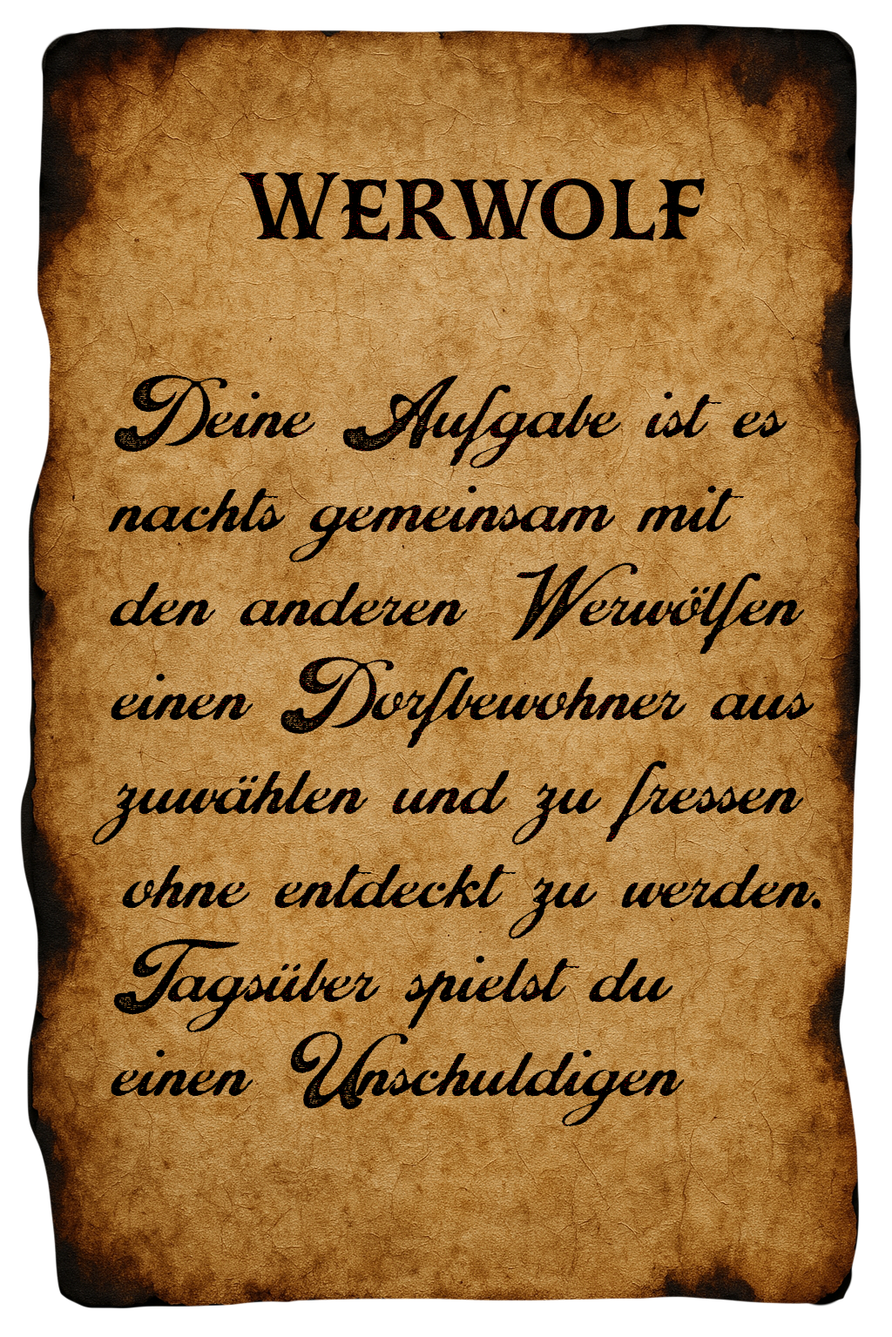
<style>
.page{position:relative;width:892px;height:1337px}
.page>*{position:absolute;margin:0}
.t1{font:78.4px "CaliforniaPersonalUse-Regular";color:#000000;scale:0.96 1}
.t2{font:95.6px "MrDarcy-Bol";color:#000000;scale:0.96 1}
.t3{font:78.4px "MyriadPro-Regular";color:#000000;scale:0.96 1}
</style>
<div class="page">
<p class="t1" style="left:91px;top:172px;width:729px;height:955px;text-align:center"><span class="t2">Werwolf<br><br></span>Deine Aufgabe ist es, nachts gemeinsam mit den anderen Werwölfen einen Dorfbewohner auszuwählen und zu fressen –ohne entdeckt zu werden<span class="t3">.</span> Tagsüber spielst du einen Unschuldigen.</p>
</div>
